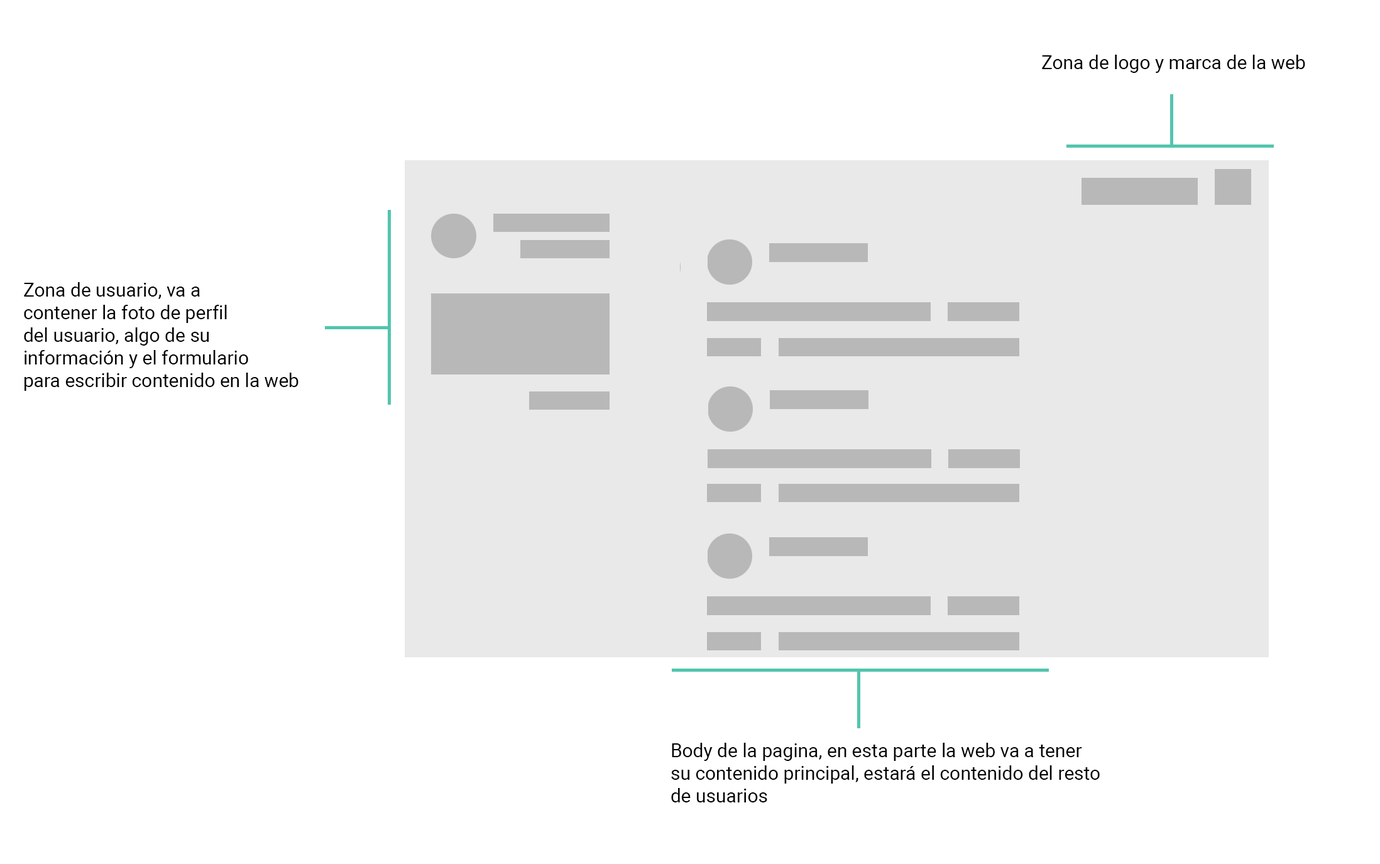
<style>
.page{position:relative;width:1380px;height:864px;background:#ffffff}
.page>*{position:absolute;margin:0}
.t1{font:18.9px "Roboto-Regular";color:#000000}
</style>
<div class="page">
<p class="t1" style="left:1042px;top:55px;width:263px;height:18px">Zona de logo y marca de la web</p>
<p class="t1" style="left:24px;top:282px;width:274px;height:109px">Zona de usuario, va a<br>contener la foto de perfil <br>del usuario, algo de su <br>información y el formulario <br>para escribir contenido en la web</p>
<p class="t1" style="left:671px;top:743px;width:429px;height:59px">Body de la pagina, en esta parte la web va a tener<br>su contenido principal, estará el contenido del resto<br>de usuarios</p>
</div>
